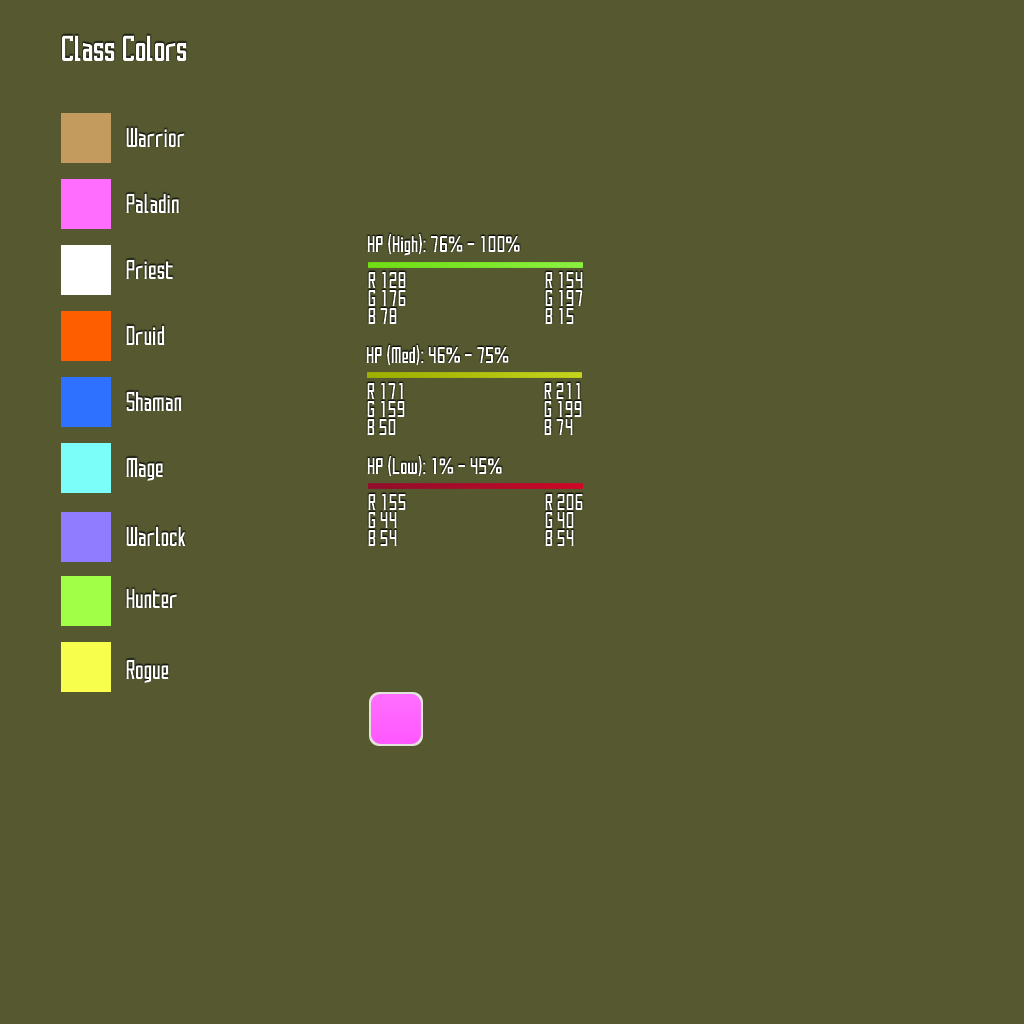
<style>
.page{position:relative;width:1024px;height:1024px;background:#56582f}
.page>*{position:absolute;margin:0}
.t1{font:32px "SAOUI-Regular";color:#ffffff}
.t2{font:24px "SAOUI-Regular";color:#ffffff}
.t3{font:20px "SAOUI-Regular";color:#ffffff}
.t4{font:20px/18px "SAOUI-Regular";color:#ffffff}
</style>
<div class="page">
<p class="t1" style="left:62px;top:35px;width:125px;height:26px">Class Colors</p>
<p class="t2" style="left:126px;top:127px;width:59px;height:20px">Warrior</p>
<p class="t2" style="left:126px;top:193px;width:53px;height:20px">Paladin</p>
<p class="t3" style="left:367px;top:234px;width:153px;height:22px">HP (High): 76% - 100%</p>
<p class="t2" style="left:126px;top:259px;width:47px;height:20px">Priest</p>
<p class="t4" style="left:368px;top:272px;width:38px;height:52px">R 128<br>G 176<br>B 78</p>
<p class="t4" style="left:545px;top:272px;width:38px;height:52px">R 154<br>G 197<br>B 15</p>
<p class="t2" style="left:126px;top:325px;width:39px;height:20px">Druid</p>
<p class="t3" style="left:366px;top:345px;width:143px;height:20px">HP (Med): 46% - 75%</p>
<p class="t4" style="left:367px;top:383px;width:38px;height:52px">R 171<br>G 159<br>B 50</p>
<p class="t4" style="left:544px;top:383px;width:38px;height:52px">R 211<br>G 199<br>B 74</p>
<p class="t2" style="left:126px;top:391px;width:56px;height:20px">Shaman</p>
<p class="t2" style="left:126px;top:457px;width:37px;height:24px">Mage</p>
<p class="t3" style="left:367px;top:456px;width:135px;height:20px">HP (Low): 1% - 45%</p>
<p class="t4" style="left:368px;top:494px;width:38px;height:52px">R 155<br>G 44<br>B 54</p>
<p class="t4" style="left:545px;top:494px;width:38px;height:52px">R 206<br>G 40<br>B 54</p>
<p class="t2" style="left:126px;top:526px;width:60px;height:20px">Warlock</p>
<p class="t2" style="left:126px;top:588px;width:51px;height:20px">Hunter</p>
<p class="t2" style="left:126px;top:659px;width:43px;height:24px">Rogue</p>
</div>
